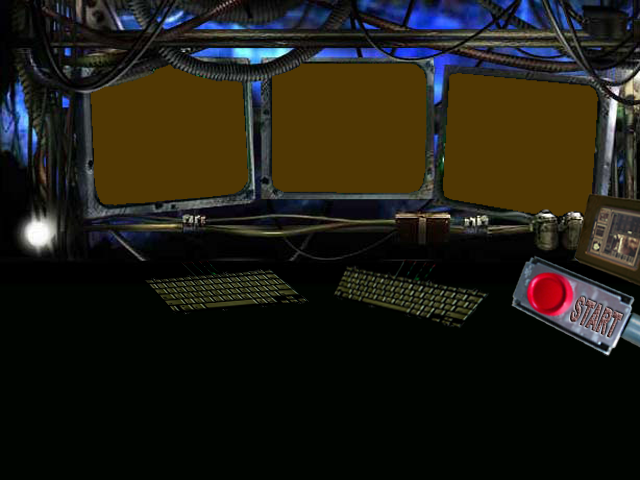
<style>
.page{position:relative;width:640px;height:480px;background:#000400}
.page>*{position:absolute;margin:0}
.t1{font:36.7px "Arial-Black";scale:0.36 1}
</style>
<div class="page">
<p class="t1" style="left:570px;top:296px;width:53px;height:42px;rotate:24deg">START</p>
<p class="t1" style="left:570px;top:296px;width:53px;height:42px;rotate:24deg">START</p>
</div>
